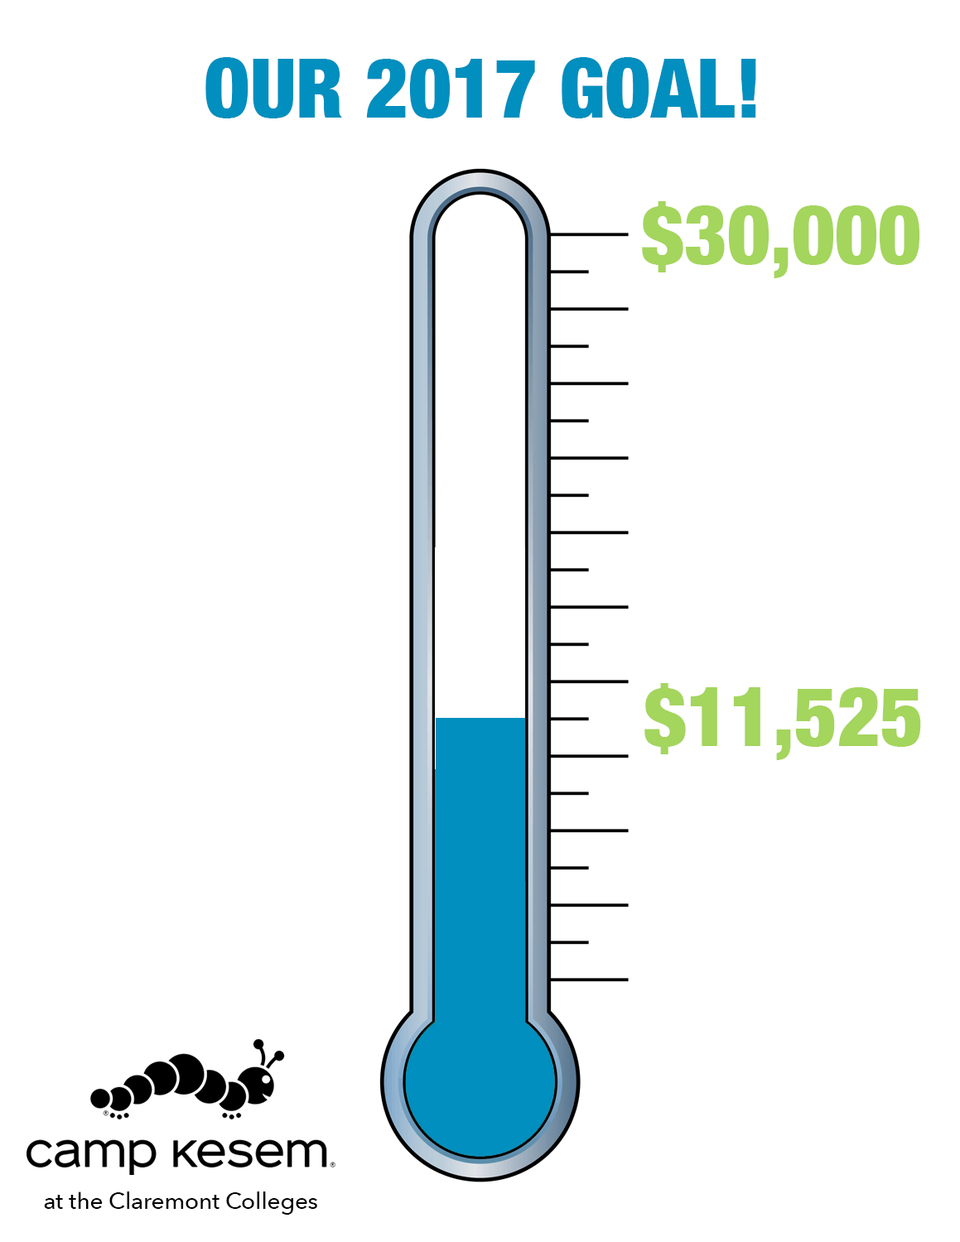
<style>
.page{position:relative;width:960px;height:1242px;background:#ffffff}
.page>*{position:absolute;margin:0}
.t1{font:82.8px "HelveticaNeue-CondensedBlack";color:#008fbe}
.t2{font:82.8px "HelveticaNeue-CondensedBlack";color:#a4d55d}
.t3{font:22.9px "AvenirNext-Medium";color:#000000}
</style>
<div class="page">
<p class="t1" style="left:205px;top:57px;width:551px;height:61px">OUR 2017 GOAL!</p>
<p class="t2" style="left:642px;top:201px;width:278px;height:77px">$30,000</p>
<p class="t2" style="left:644px;top:683px;width:277px;height:77px">$11,525</p>
<p class="t3" style="left:44px;top:1192px;width:273px;height:23px">at the Claremont Colleges</p>
</div>
